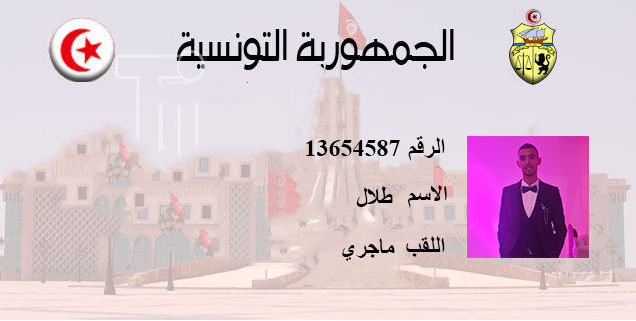
<style>
.page{position:relative;width:636px;height:321px}
.page>*{position:absolute;margin:0}
.t1{font:24px "TimesNewRomanPS-BoldMT";color:#000000}
</style>
<div class="page">
<p class="t1" style="left:408px;top:136px;width:37px;height:25px">الرقم</p>
<p class="t1" style="left:306px;top:140px;width:94px;height:16px">13654587</p>
<p class="t1" style="left:407px;top:185px;width:40px;height:23px">الاسم</p>
<p class="t1" style="left:356px;top:186px;width:37px;height:21px">طلال</p>
<p class="t1" style="left:342px;top:238px;width:53px;height:23px">ماجري</p>
<p class="t1" style="left:406px;top:236px;width:39px;height:21px">اللقب</p>
</div>
